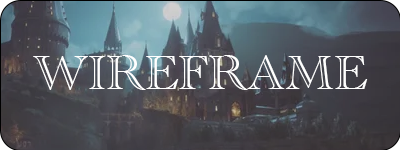
<style>
.page{position:relative;width:400px;height:150px}
.page>*{position:absolute;margin:0}
.t1{font:50px "AcademyEngravedLetPlain";color:#ffffff}
</style>
<div class="page">
<p class="t1" style="left:33px;top:55px;width:335px;height:35px">WIREFRAME</p>
</div>
